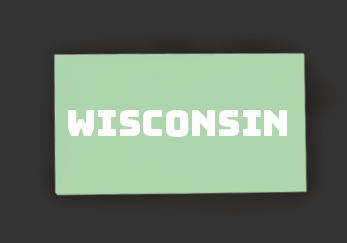
<style>
.page{position:relative;width:347px;height:243px;background:#333333}
.page>*{position:absolute;margin:0}
.t1{font:36px "Bungee-Regular";color:#ffffff}
</style>
<div class="page">
<p class="t1" style="left:68px;top:110px;width:219px;height:27px">wisconsin</p>
</div>
